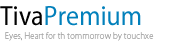
<style>
.page{position:relative;width:170px;height:41px;background:#ffffff}
.page>*{position:absolute;margin:0}
.t1{font:28px "MyriadPro-SemiCn";color:#0280bb}
.t2{font:28px "MyriadPro-SemiCn";color:#020202}
.t3{font:9px "MyriadPro-Light";color:#aeadad}
</style>
<div class="page">
<p class="t1" style="left:0px;top:6px;width:141px;height:20px"><span class="t2">Tiva</span>Premium</p>
<p class="t3" style="left:5px;top:32px;width:149px;height:9px">Eyes, Heart for th tommorrow by touchxe</p>
</div>
